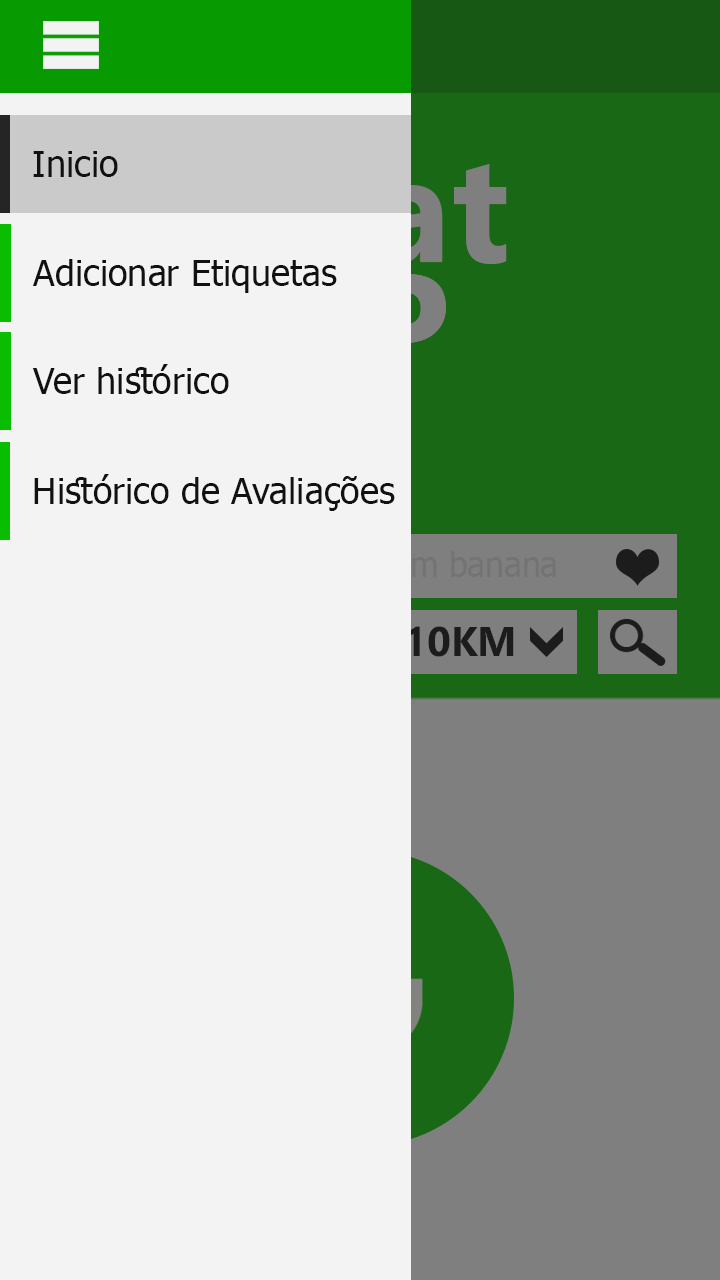
<style>
.page{position:relative;width:720px;height:1280px;background:#f3f3f3}
.page>*{position:absolute;margin:0}
.t1{font:36px "Tahoma";color:#111111}
.t2{font:41.4px "SegoeUI-Bold";color:#111111}
</style>
<div class="page">
<p class="t1" style="left:33px;top:151px;width:85px;height:26px">Inicio</p>
<p class="t1" style="left:33px;top:259px;width:304px;height:34px">Adicionar Etiquetas</p>
<p class="t1" style="left:32px;top:364px;width:197px;height:30px">Ver histórico</p>
<p class="t1" style="left:34px;top:474px;width:361px;height:37px">Histórico de Avaliações</p>
<p class="t2" style="left:407px;top:626px;width:107px;height:31px">10KM</p>
</div>
